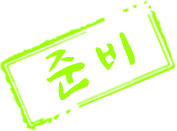
<style>
.page{position:relative;width:177px;height:131px;background:#ffffff}
.page>*{position:absolute;margin:0}
.t1{font:52.1px "SangSangRockOTF";letter-spacing:0.28em;color:#9fff0d}
</style>
<div class="page">
<p class="t1" style="left:45px;top:32px;width:90px;height:68px;rotate:-21deg">준비</p>
</div>
